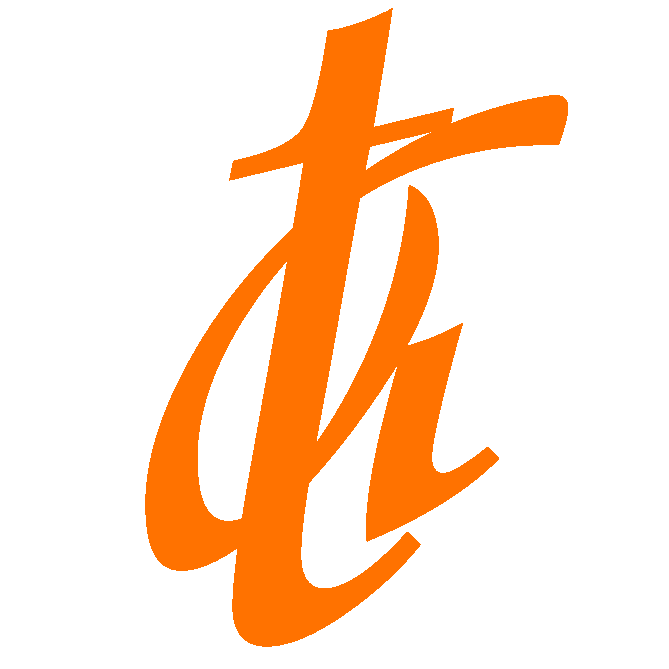
<style>
.page{position:relative;width:669px;height:669px;background:#ffffff}
.page>*{position:absolute;margin:0}
.t1{font:1199px "Vivaldii";color:#ff7200}
.t2{font:1017.7px "Vivaldii";color:#ff7200}
</style>
<div class="page">
<p class="t1" style="left:229px;top:8px;width:225px;height:639px;rotate:-13deg">t</p>
<p class="t2" style="left:145px;top:95px;width:423px;height:476px;rotate:-9deg">a</p>
</div>
